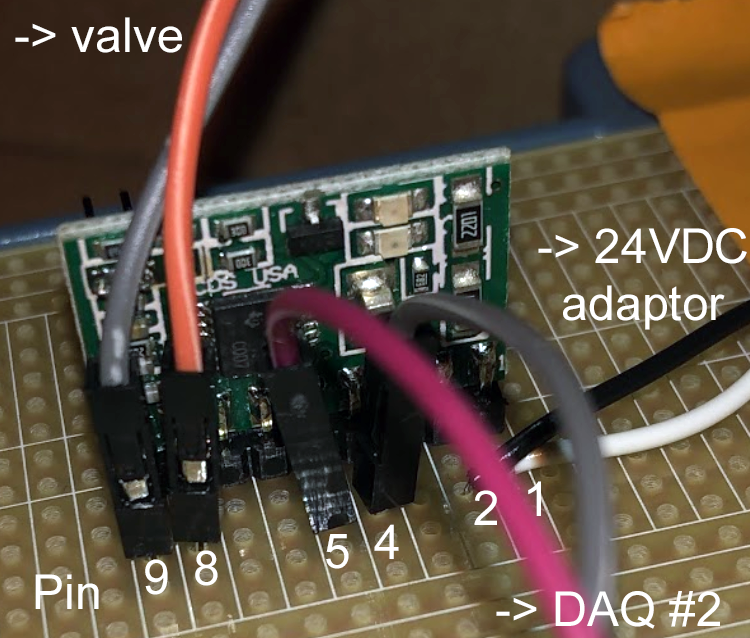
<style>
.page{position:relative;width:750px;height:638px}
.page>*{position:absolute;margin:0}
.t1{font:48px "ArialMT";color:#ffffff}
</style>
<div class="page">
<p class="t1" style="left:15px;top:17px;width:167px;height:36px">-&gt; valve</p>
<p class="t1" style="left:538px;top:228px;width:209px;height:102px;text-align:center">-&gt; 24VDC<br>adaptor</p>
<p class="t1" style="left:528px;top:481px;width:13px;height:35px">1</p>
<p class="t1" style="left:474px;top:490px;width:23px;height:35px">2</p>
<p class="t1" style="left:326px;top:534px;width:23px;height:35px">5</p>
<p class="t1" style="left:374px;top:524px;width:25px;height:35px">4</p>
<p class="t1" style="left:195px;top:550px;width:23px;height:36px">8</p>
<p class="t1" style="left:145px;top:559px;width:23px;height:36px">9</p>
<p class="t1" style="left:35px;top:574px;width:64px;height:35px">Pin</p>
<p class="t1" style="left:496px;top:591px;width:224px;height:38px">-&gt; DAQ #2</p>
</div>
